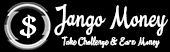
<style>
.page{position:relative;width:170px;height:52px;background:#000000}
.page>*{position:absolute;margin:0}
.t1{font:30.2px "Ollie";letter-spacing:0.02em;color:#ffffff;scale:0.79 1}
.t2{font:30.2px "Ollie";letter-spacing:0.02em;color:#fefefe;scale:0.79 1}
.t3{font:11.4px "Ollie";letter-spacing:0.02em;color:#ffffff;scale:0.79 1}
</style>
<div class="page">
<p class="t1" style="left:54px;top:4px;width:114px;height:32px">Jango <span class="t2">Money</span></p>
<p class="t3" style="left:61px;top:36px;width:99px;height:12px">Take Challenge &amp; Earn Money</p>
</div>
